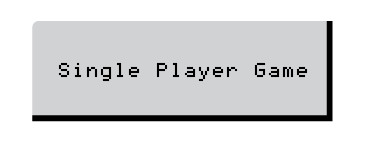
<style>
.page{position:relative;width:375px;height:142px;background:#d1d2d4}
.page>*{position:absolute;margin:0}
.t1{font:16px "Mono0756";color:#000000}
</style>
<div class="page">
<p class="t1" style="left:58px;top:62px;width:250px;height:20px">Single Player Game</p>
</div>
